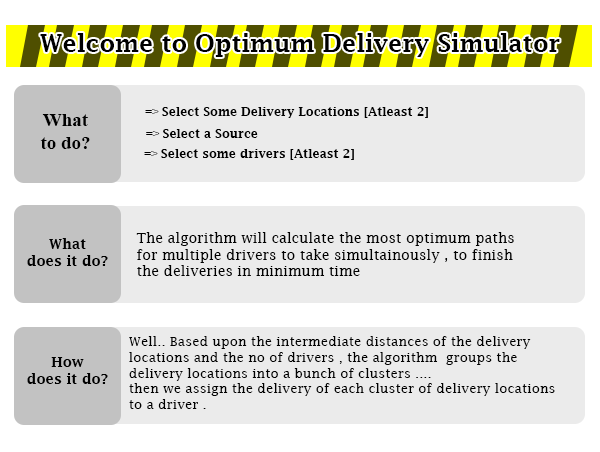
<style>
.page{position:relative;width:600px;height:452px;background:#ebebeb}
.page>*{position:absolute;margin:0}
.t1{font:24px "LucidaFax-Demi";color:#000000}
.t2{font:12px "LucidaFax-Demi";color:#000000}
.t3{font:12px "TimesNewRomanPSMT";color:#000000}
.t4{font:19px "TimesNewRomanPS-BoldMT";color:#000000}
.t5{font:14px "LucidaFax";color:#000000}
.t6{font:14px "LucidaFax-Demi";color:#000000}
.t7{font:13.2px "LucidaFax";color:#000000}
</style>
<div class="page">
<p class="t1" style="left:40px;top:33px;width:520px;height:24px">Welcome to Optimum Delivery Simulator</p>
<p class="t2" style="left:145px;top:107px;width:283px;height:11px"><span class="t3">=&gt; </span>Select Some Delivery Locations [Atleast 2]</p>
<p class="t4" style="left:40px;top:114px;width:50px;height:35px;text-align:center">What <br>to do?</p>
<p class="t2" style="left:146px;top:129px;width:112px;height:9px"><span class="t3">=&gt; </span>Select a Source</p>
<p class="t2" style="left:144px;top:149px;width:210px;height:11px"><span class="t3">=&gt; </span>Select some drivers [Atleast 2]</p>
<p class="t5" style="left:136px;top:232px;width:378px;height:44px">The algorithm will calculate the most optimum paths <br>for multiple drivers to take simultainously , to finish <br>the deliveries in minimum time</p>
<p class="t6" style="left:27px;top:238px;width:81px;height:28px;text-align:center">What <br>does it do?</p>
<p class="t7" style="left:129px;top:336px;width:426px;height:73px">Well.. Based upon the intermediate distances of the delivery <br>locations and the no of drivers , the algorithm  groups the <br>delivery locations into a bunch of clusters ....<br>then we assign the delivery of each cluster of delivery locations <br>to a driver .</p>
<p class="t6" style="left:27px;top:357px;width:81px;height:27px;text-align:center"><span class="t2"><br><br></span>How <br>does it do?</p>
</div>
